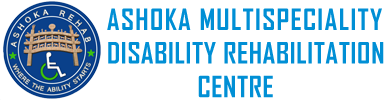
<style>
.page{position:relative;width:391px;height:100px;background:#ffffff}
.page>*{position:absolute;margin:0}
.t1{font:28px "AgencyFB-Bold";letter-spacing:0.025em;color:#008fd5}
.t2{font:28px "AgencyFB-Bold";letter-spacing:0.05em;color:#008fd5}
</style>
<div class="page">
<p class="t1" style="left:107px;top:8px;width:277px;height:90px"><span class="t2">ASHOKA MULTISPECIALITY<br></span>DISABILITY REHABILITATION <br>              CENTRE</p>
</div>
